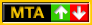
<style>
.page{position:relative;width:92px;height:25px;background:#000000}
.page>*{position:absolute;margin:0}
.t1{font:16px "HelveticaNeue-Bold"}
</style>
<div class="page">
<p class="t1" style="left:11px;top:6px;width:34px;height:12px">MTA</p>
</div>
